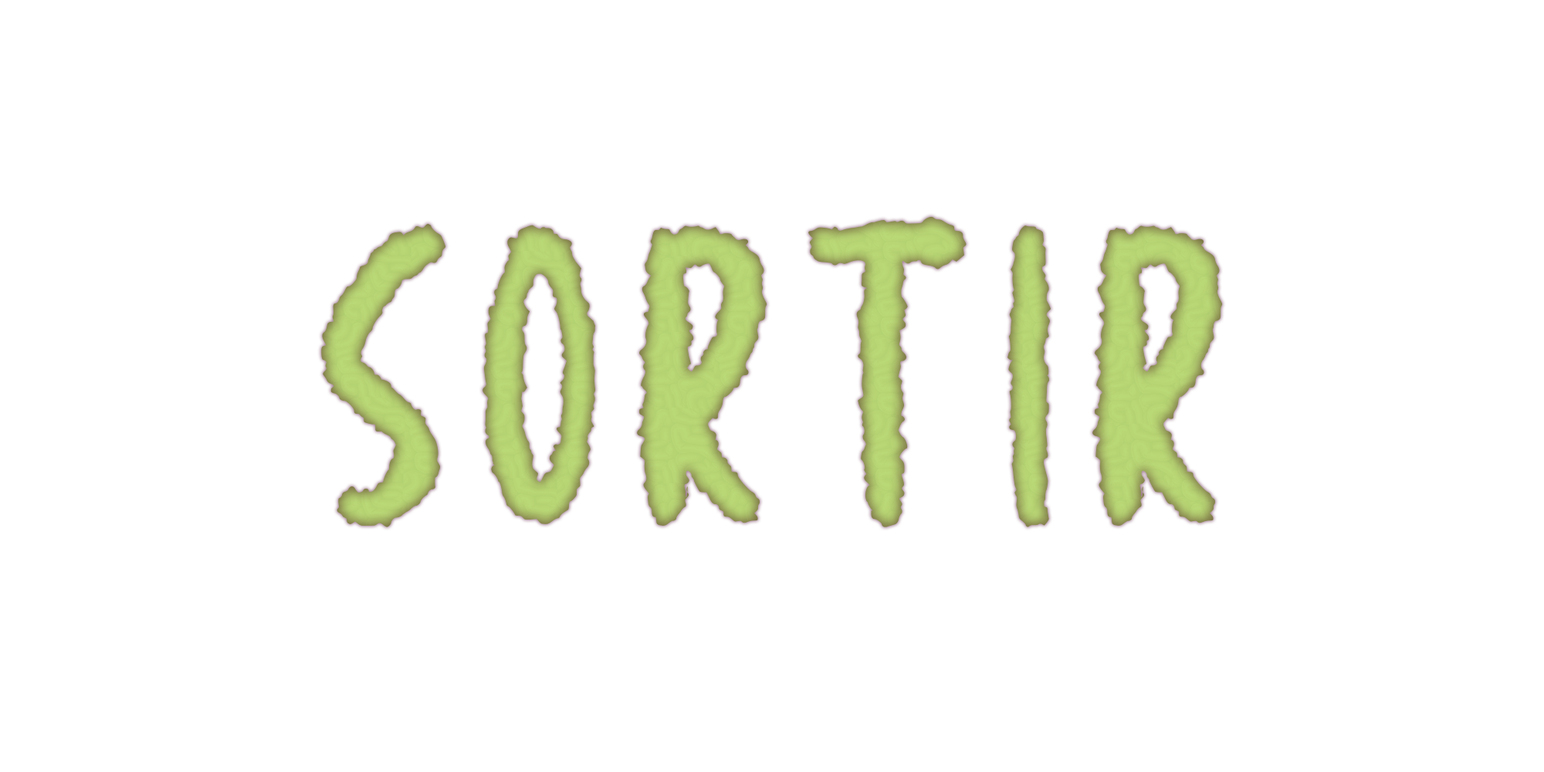
<style>
.page{position:relative;width:1544px;height:772px;background:#ffffff}
.page>*{position:absolute;margin:0}
.t1{font:321.7px "Metalien";letter-spacing:0.1em;color:#b7d974}
</style>
<div class="page">
<p class="t1" style="left:321px;top:216px;width:902px;height:311px">Sortir</p>
</div>
